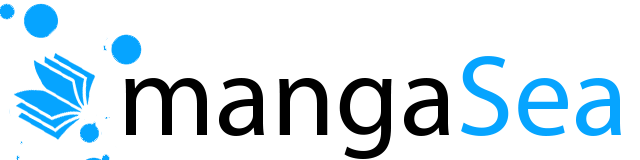
<style>
.page{position:relative;width:640px;height:160px;background:#ffffff}
.page>*{position:absolute;margin:0}
.t1{font:116.2px "MyriadPro-Regular";color:#06a4ff}
.t2{font:116.2px "MyriadPro-Regular";color:#000000}
</style>
<div class="page">
<p class="t1" style="left:461px;top:56px;width:160px;height:80px">Sea</p>
<p class="t2" style="left:125px;top:78px;width:324px;height:81px">manga</p>
</div>
